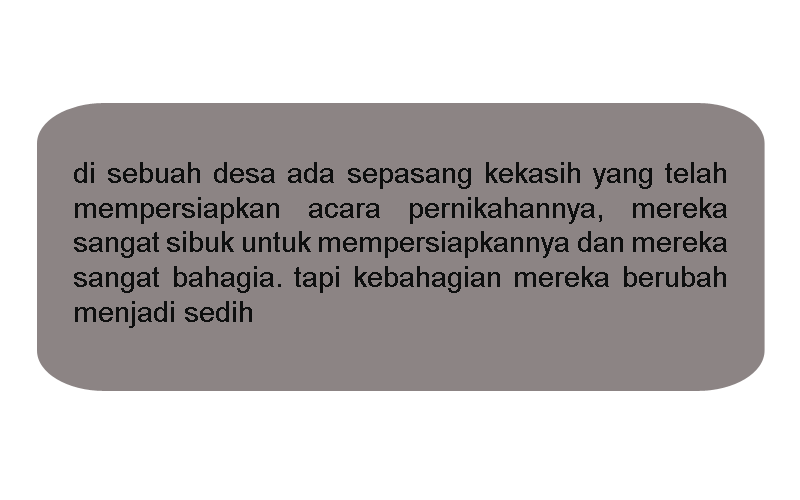
<style>
.page{position:relative;width:800px;height:500px;background:#ffffff}
.page>*{position:absolute;margin:0}
.t1{font:29px "ArialMT";color:#0e0f0f}
</style>
<div class="page">
<p class="t1" style="left:74px;top:162px;width:653px;height:166px;text-align:justify">di sebuah desa ada sepasang kekasih yang telah  mempersiapkan acara pernikahannya, mereka sangat sibuk untuk mempersiapkannya dan mereka sangat bahagia. tapi kebahagian mereka berubah menjadi sedih</p>
</div>
